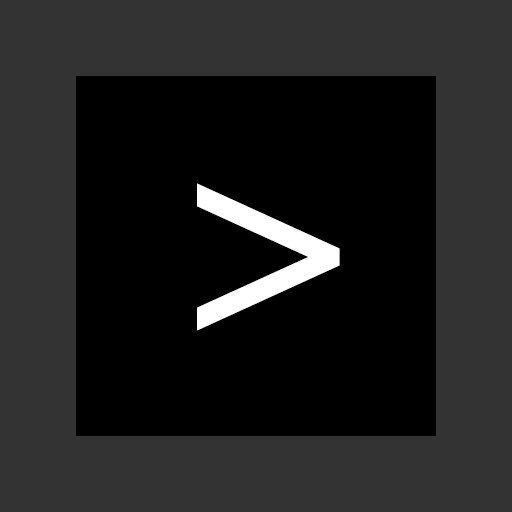
<style>
.page{position:relative;width:512px;height:512px;background:#333333}
.page>*{position:absolute;margin:0}
.t1{font:280.8px "DINCondensed-Bold";letter-spacing:-0.025em;color:#ffffff}
</style>
<div class="page">
<p class="t1" style="left:197px;top:183px;width:143px;height:148px">&gt;</p>
</div>
